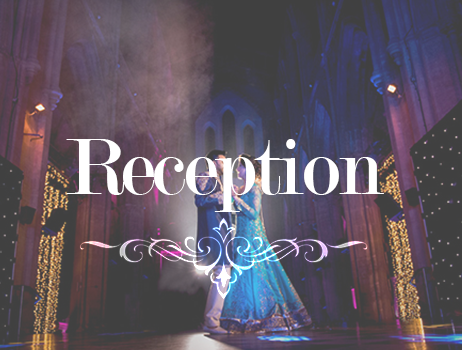
<style>
.page{position:relative;width:462px;height:350px}
.page>*{position:absolute;margin:0}
.t1{font:85px "Modern-Regular";letter-spacing:-0.03em;color:#ffffff}
</style>
<div class="page">
<p class="t1" style="left:66px;top:139px;width:318px;height:73px">Reception</p>
</div>
